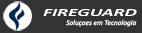
<style>
.page{position:relative;width:142px;height:33px;background:#333333}
.page>*{position:absolute;margin:0}
.t1{font:11px "Calibri-BoldItalic";color:#ffffff;scale:1.76 1}
.t2{font:7.4px "Calibri-Italic";color:#ffffff}
</style>
<div class="page">
<p class="t1" style="left:43px;top:9px;width:94px;height:7px">FIREGUARD</p>
<p class="t2" style="left:66px;top:19px;width:71px;height:8px">Soluçoes em Tecnologia</p>
</div>
